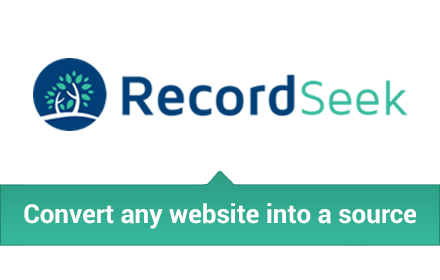
<style>
.page{position:relative;width:440px;height:280px;background:#ffffff}
.page>*{position:absolute;margin:0}
.t1{font:26px "Roboto-Bold";color:#ffffff}
</style>
<div class="page">
<p class="t1" style="left:24px;top:203px;width:392px;height:26px">Convert any website into a source</p>
</div>
